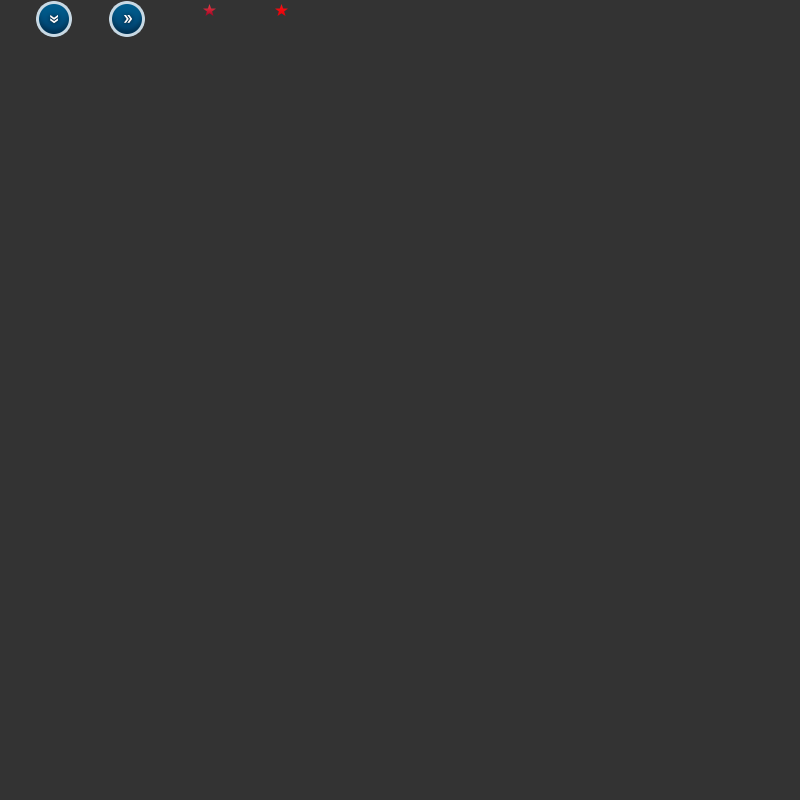
<style>
.page{position:relative;width:800px;height:800px;background:#333333}
.page>*{position:absolute;margin:0}
.t1{font:20.8px "Vollkorn-Regular";color:#ffffff}
</style>
<div class="page">
<p class="t1" style="left:50px;top:15px;width:8px;height:8px;rotate:90deg">»</p>
<p class="t1" style="left:124px;top:15px;width:8px;height:8px">»</p>
</div>
